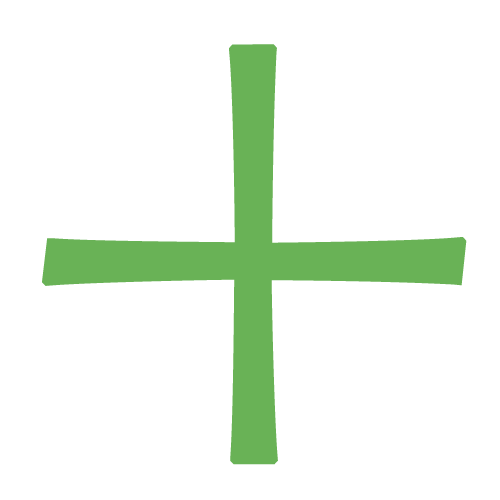
<style>
.page{position:relative;width:500px;height:500px;background:#ffffff}
.page>*{position:absolute;margin:0}
.t1{font:992px "QumpellkaNo12";color:#69b256;font-weight:bold}
</style>
<div class="page">
<p class="t1" style="left:42px;top:44px;width:425px;height:421px">+</p>
</div>
